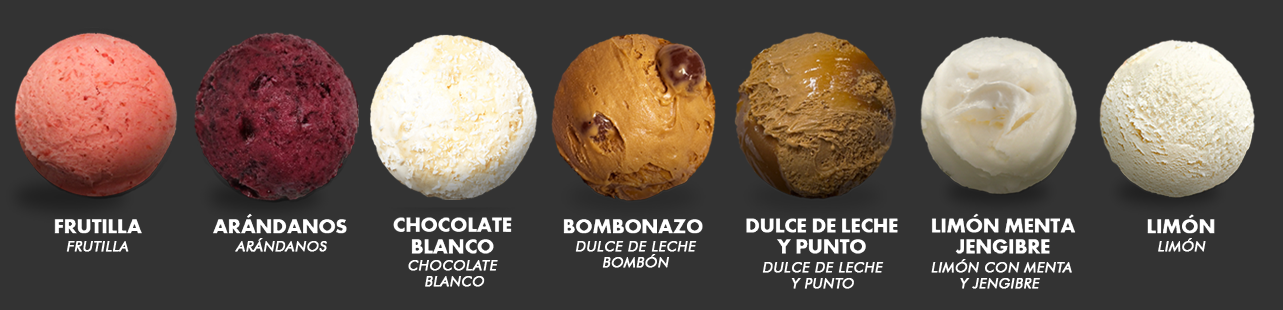
<style>
.page{position:relative;width:1283px;height:310px;background:#333333}
.page>*{position:absolute;margin:0}
.t1{font:14px "FuturaBT-Book";letter-spacing:0.02em;color:#ffffff;text-transform:uppercase;font-weight:bold;font-style:italic}
</style>
<div class="page">
<p class="t1" style="left:66px;top:241px;width:63px;height:11px">frutilla</p>
<p class="t1" style="left:235px;top:238px;width:92px;height:14px">arándanos</p>
<p class="t1" style="left:575px;top:241px;width:122px;height:27px;text-align:center">Dulce de leche<br>Bombón</p>
<p class="t1" style="left:1158px;top:238px;width:48px;height:14px">Limón</p>
<p class="t1" style="left:408px;top:260px;width:90px;height:27px;text-align:center">chocolate <br>blanco</p>
<p class="t1" style="left:762px;top:262px;width:122px;height:27px;text-align:center">Dulce de leche<br>y punto</p>
<p class="t1" style="left:931px;top:259px;width:141px;height:30px;text-align:center">Limón con menta<br>y jengibre</p>
</div>
